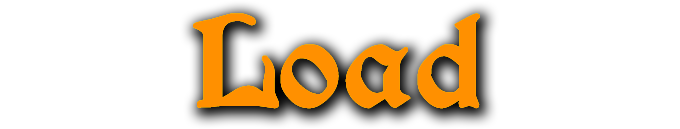
<style>
.page{position:relative;width:680px;height:129px;background:#ffffff}
.page>*{position:absolute;margin:0}
.t1{font:144px "Augusta-Regular";color:#ff9000;font-weight:bold}
</style>
<div class="page">
<p class="t1" style="left:193px;top:13px;width:287px;height:96px">Load</p>
<p class="t1" style="left:193px;top:13px;width:287px;height:96px">Load</p>
<p class="t1" style="left:193px;top:13px;width:287px;height:96px">Load</p>
</div>
